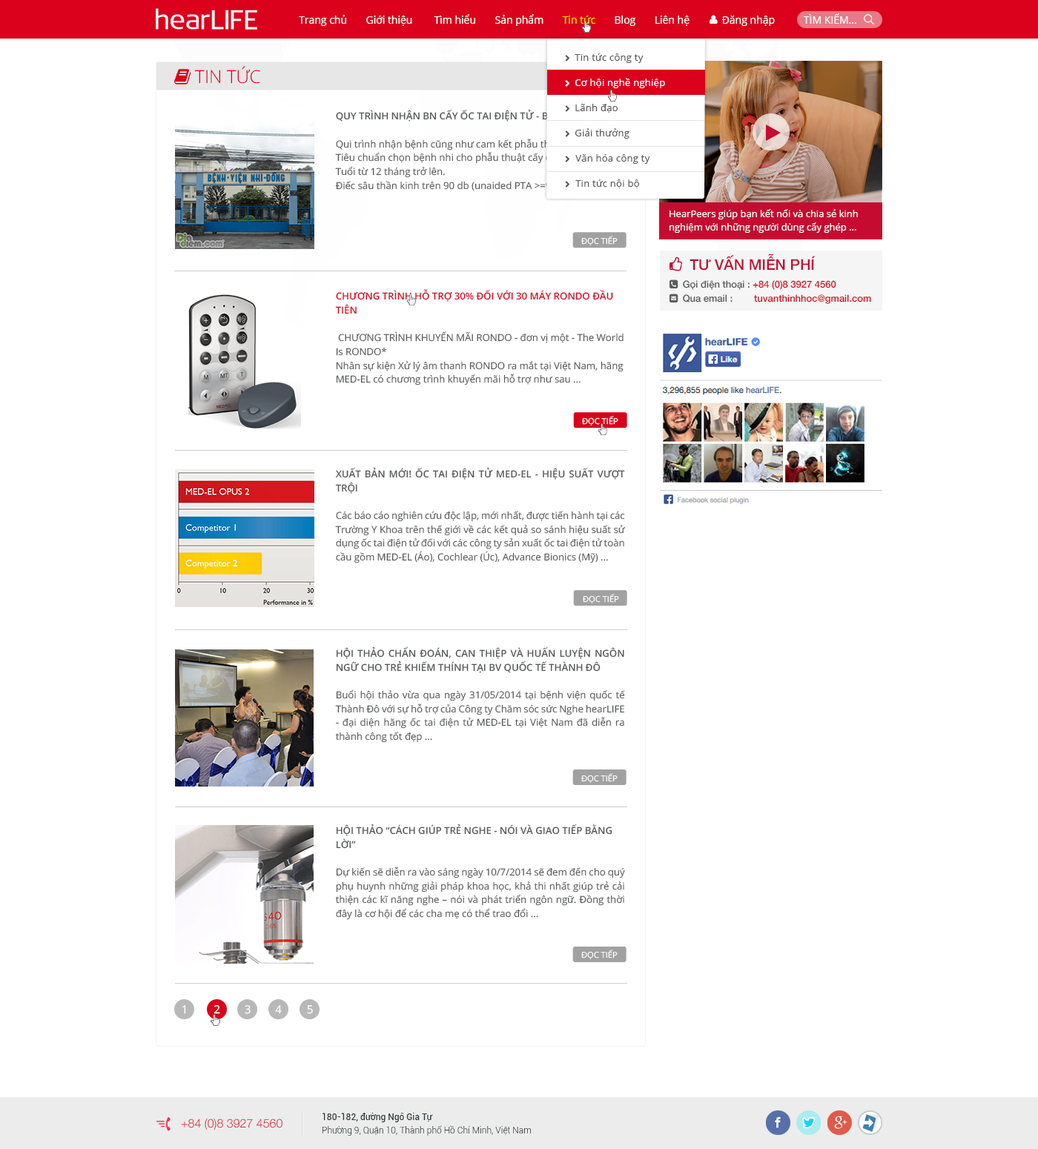
<style>
.page{position:relative;width:1038px;height:1149px;background:#ffffff}
.page>*{position:absolute;margin:0}
.t1{font:10.4px "OpenSans";color:#ffffff}
.t2{font:10.4px "OpenSans";color:#ffd800}
.t3{font:9.6px/13.8px "OpenSans";color:#58595b}
.t4{font:9.6px/13.8px "OpenSans-Semibold";color:#58595b;text-transform:uppercase}
.t5{font:9.6px/13.3px "OpenSans";color:#ffffff}
.t6{font:8.2px "OpenSans";color:#ffffff;text-transform:uppercase}
.t7{font:9.6px/13.8px "OpenSans-Semibold";color:#db001b;text-transform:uppercase}
.t8{font:9.6px/13.8px "OpenSans-Semibold";color:#f68b1f;text-transform:uppercase}
.t9{font:11.1px "OpenSans";color:#ffffff}
.t10{font:11.9px "HelveticaNeue-Light";color:#dd2f3f}
.t11{font:8.9px/13.3px "Roboto-Light";color:#373f41}
.t12{font:8.9px/13.3px "Roboto-Medium";color:#373f41}
</style>
<div class="page">
<p class="t1" style="left:299px;top:13px;width:557px;height:13px">Trang chủ       Giới thiệu        Tìm hiểu       Sản phẩm       <span class="t2">Tin tức</span>       Blog       Liên hệ            Đăng nhập           TÌM KIẾM...</p>
<p class="t3" style="left:335px;top:109px;width:279px;height:82px;text-align:justify"><span class="t4">Quy trình nhận BN cấy ốc tai điện tử - BV Nhi Đồng 1<br><br></span>Qui trình nhận bệnh cũng như cam kết phẫu thuật :<br>Tiêu chuẩn chọn bệnh nhi cho phẫu thuật cấy điện ốc tai:<br>Tuổi từ 12 tháng trở lên.<br>Điếc sâu thần kinh trên 90 db (unaided PTA &gt;=90db) ...</p>
<p class="t5" style="left:669px;top:209px;width:189px;height:24px">HearPeers giúp bạn kết nối và chia sẻ kinh nghiệm với những người dùng cấy ghép ...</p>
<p class="t6" style="left:581px;top:236px;width:36px;height:9px">Đọc tiếp</p>
<p class="t3" style="left:335px;top:289px;width:288px;height:96px"><span class="t7">CHƯƠNG TRÌNH HỖ TRỢ 30% ĐỐI VỚI 30 MÁY RONDO ĐẦU TIÊN<br></span><span class="t8"><br></span> CHƯƠNG TRÌNH KHUYẾN MÃI RONDO - đơn vị một - The World Is RONDO*<br>Nhân sự kiện Xử lý âm thanh RONDO ra mắt tại Việt Nam, hãng MED-EL có chương trình khuyến mãi hỗ trợ như sau ...</p>
<p class="t6" style="left:582px;top:416px;width:36px;height:9px">Đọc tiếp</p>
<p class="t3" style="left:335px;top:467px;width:291px;height:96px;text-align:justify"><span class="t4">Xuất bản mới! Ốc tai điện tử MED-EL - Hiệu suất vượt trội<br><br></span>Các báo cáo nghiên cứu độc lập, mới nhất, được tiến hành tại các Trường Y Khoa trên thế giới về các kết quả so sánh hiệu suất sử dụng ốc tai điện tử đối với các công ty sản xuất ốc tai điện tử toàn cầu gồm MED-EL (Áo), Cochlear (Úc), Advance Bionics (Mỹ) ...</p>
<p class="t6" style="left:583px;top:594px;width:36px;height:9px">Đọc tiếp</p>
<p class="t3" style="left:335px;top:646px;width:290px;height:97px;text-align:justify"><span class="t4">HỘI THẢO CHẨN ĐOÁN, CAN THIỆP VÀ HUẤN LUYỆN NGÔN NGỮ CHO TRẺ KHIẾM THÍNH TẠI BV QUỐC TẾ THÀNH ĐÔ<br><br></span>Buổi hội thảo vừa qua ngày 31/05/2014 tại bệnh viện quốc tế Thành Đô với sự hỗ trợ của Công ty Chăm sóc sức Nghe hearLIFE - đại diện hãng ốc tai điện tử MED-EL tại Việt Nam đã diễn ra thành công tốt đẹp ...</p>
<p class="t6" style="left:581px;top:773px;width:36px;height:10px">Đọc tiếp</p>
<p class="t3" style="left:335px;top:824px;width:290px;height:96px"><span class="t4">Hội thảo “CÁCH GIÚP TRẺ NGHE - NÓI VÀ GIAO TIẾP BẰNG LỜI”<br><br></span>Dự kiến sẽ diễn ra vào sáng ngày 10/7/2014 sẽ đem đến cho quý phụ huynh những giải pháp khoa học, khả thi nhất giúp trẻ cải thiện các kĩ năng nghe – nói và phát triển ngôn ngữ. Đồng thời đây là cơ hội để các cha mẹ có thể trao đổi ...</p>
<p class="t6" style="left:581px;top:950px;width:36px;height:9px">Đọc tiếp</p>
<p class="t9" style="left:182px;top:1005px;width:4px;height:9px">1</p>
<p class="t9" style="left:213px;top:1005px;width:7px;height:9px">2</p>
<p class="t9" style="left:245px;top:1005px;width:6px;height:9px">3</p>
<p class="t9" style="left:275px;top:1005px;width:7px;height:9px">4</p>
<p class="t9" style="left:307px;top:1005px;width:6px;height:9px">5</p>
<p class="t10" style="left:181px;top:1119px;width:101px;height:11px">+84 (0)8 3927 4560</p>
<p class="t11" style="left:322px;top:1113px;width:210px;height:23px"><span class="t12">180-182, đường Ngô Gia Tự<br></span>Phường 9, Quận 10, Thành phố Hồ Chí Minh, Việt Nam</p>
</div>
